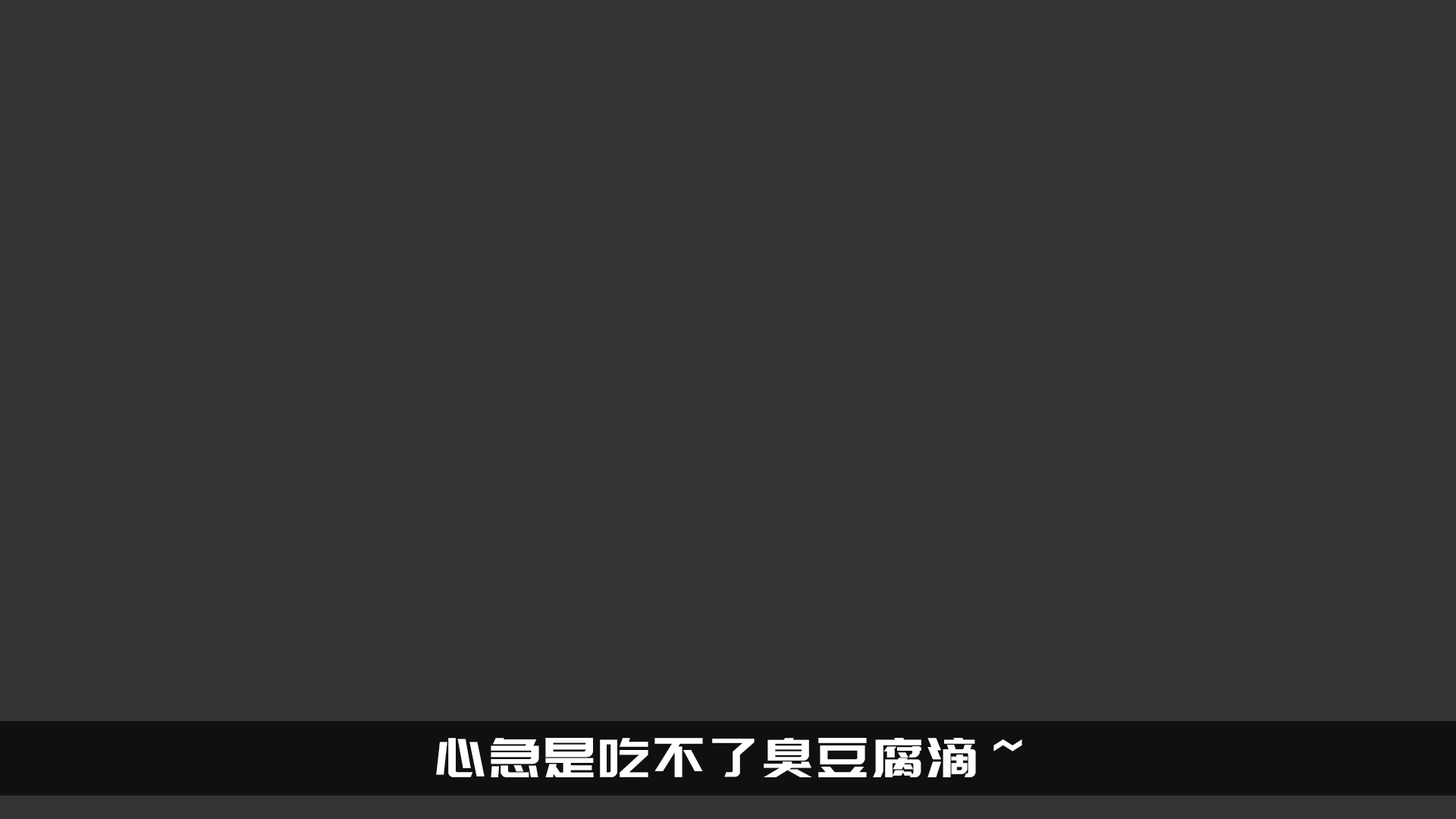
<style>
.page{position:relative;width:1456px;height:819px;background:#333333}
.page>*{position:absolute;margin:0}
.t1{font:54.6px "PangMenZhengDao-3";color:#ffffff}
</style>
<div class="page">
<p class="t1" style="left:436px;top:738px;width:586px;height:39px">心急是吃不了臭豆腐滴~</p>
</div>
